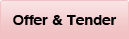
<style>
.page{position:relative;width:129px;height:39px}
.page>*{position:absolute;margin:0}
.t1{font:14px "Helvetica-Bold";color:#000000;scale:1.06 1}
</style>
<div class="page">
<p class="t1" style="left:13px;top:15px;width:104px;height:10px">Offer &amp; Tender</p>
</div>
